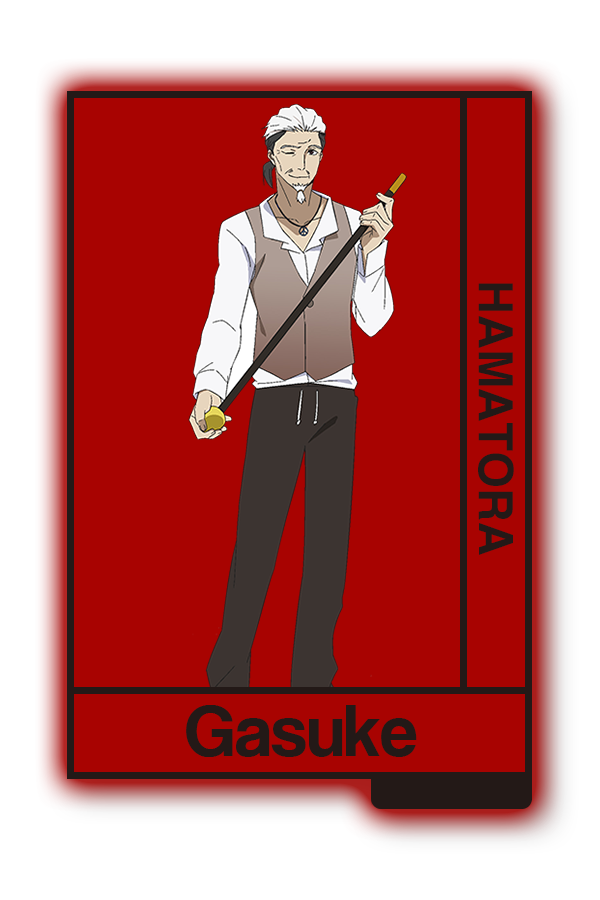
<style>
.page{position:relative;width:600px;height:900px;background:#a80301}
.page>*{position:absolute;margin:0}
.t1{font:47.4px "Helvetica-Bold";color:#231917}
.t2{font:75px "CoolveticaRg-Regular";color:#231917}
</style>
<div class="page">
<p class="t1" style="left:478px;top:283px;width:36px;height:272px;rotate:90deg">HAMATORA</p>
<p class="t2" style="left:186px;top:705px;width:231px;height:52px">Gasuke</p>
</div>
